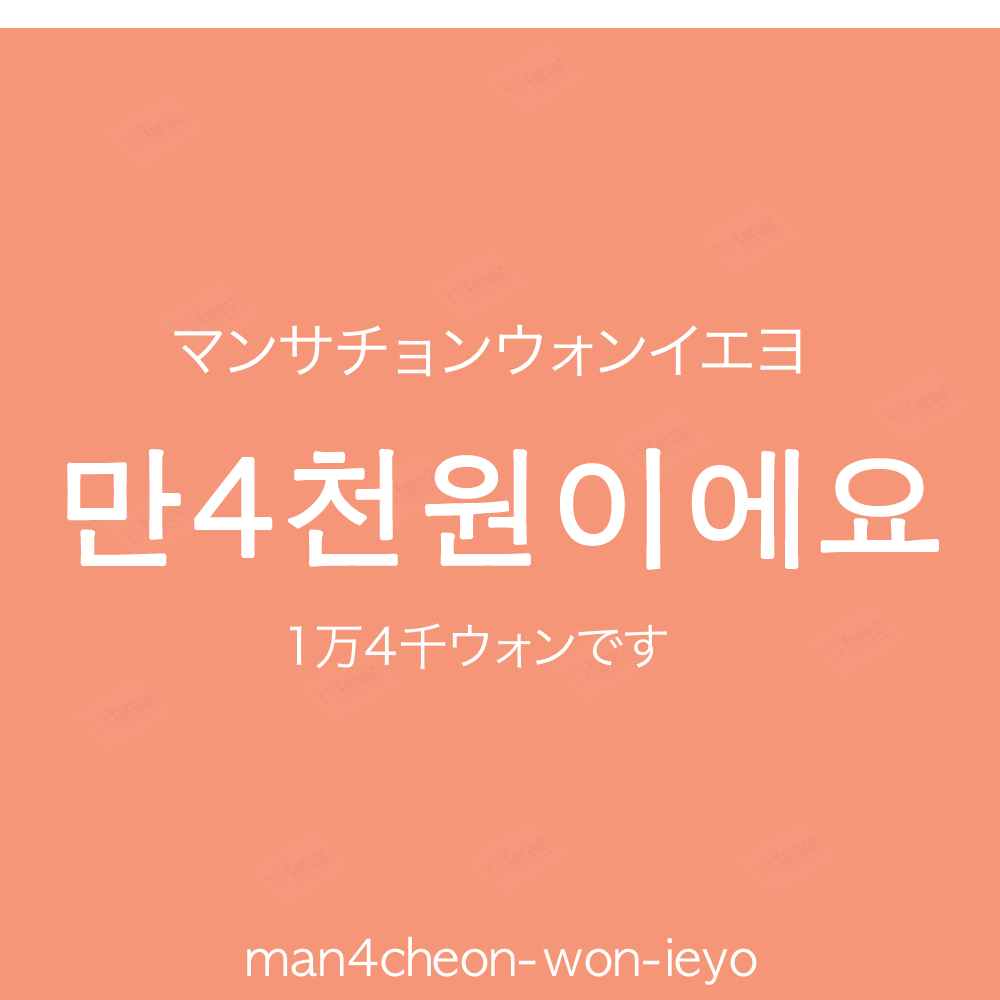
<style>
.page{position:relative;width:1000px;height:1000px;background:#f69679}
.page>*{position:absolute;margin:0}
.t1{font:60px "HiraKakuProN-W3";color:#ffffff;text-transform:uppercase}
.t2{font:130px "AppleGothic";color:#ffffff;font-weight:bold}
.t3{font:50px "HiraKakuProN-W3";color:#ffffff}
.t4{font:50px "AppleGothic";color:#ffffff}
</style>
<div class="page">
<p class="t1" style="left:174px;top:324px;width:627px;height:53px">マンサチョンウォンイエヨ</p>
<p class="t2" style="left:67px;top:448px;width:872px;height:122px">만4천원이에요</p>
<p class="t3" style="left:290px;top:623px;width:377px;height:47px">1万4千ウォンです</p>
<p class="t4" style="left:247px;top:936px;width:510px;height:49px">man4cheon-won-ieyo</p>
</div>
